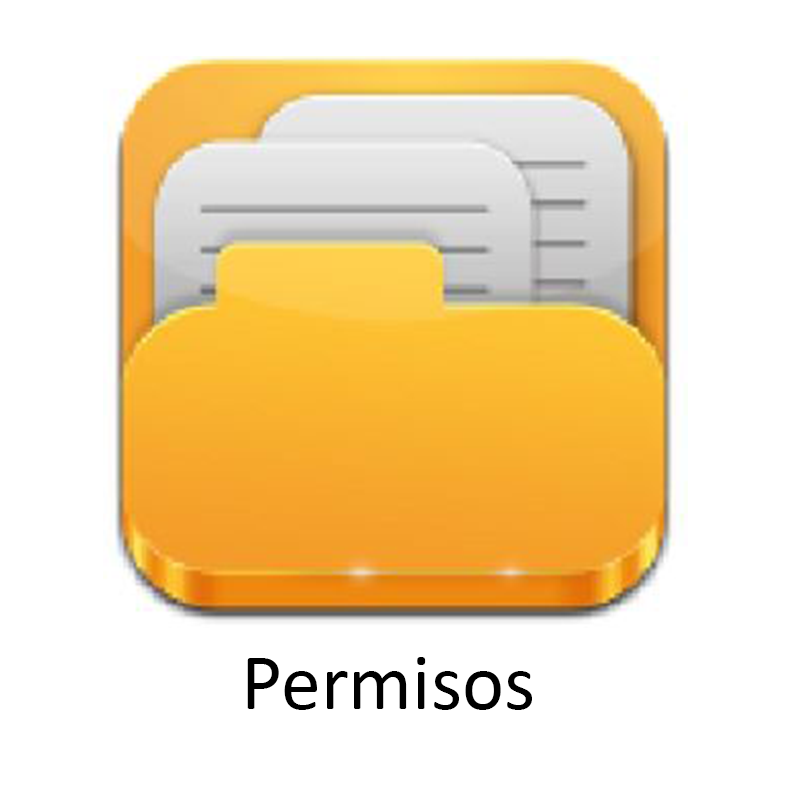
<style>
.page{position:relative;width:800px;height:800px;background:#ffffff}
.page>*{position:absolute;margin:0}
.t1{font:80px "Calibri";color:#000000}
</style>
<div class="page">
<p class="t1" style="left:247px;top:657px;width:285px;height:53px">Permisos</p>
</div>
